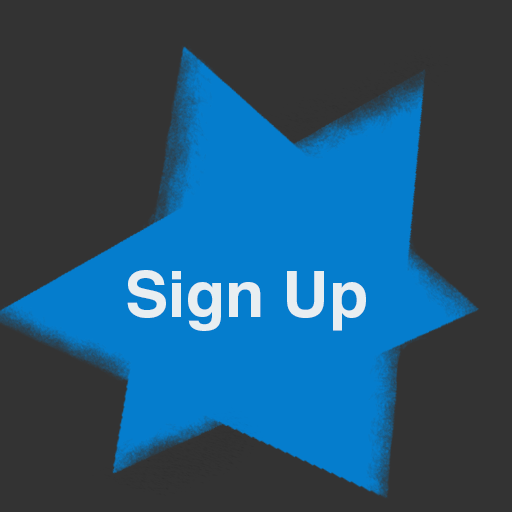
<style>
.page{position:relative;width:512px;height:512px;background:#333333}
.page>*{position:absolute;margin:0}
.t1{font:64.4px "Helvetica-Bold";color:#e8eef1}
</style>
<div class="page">
<p class="t1" style="left:127px;top:270px;width:239px;height:61px">Sign Up</p>
</div>
